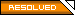
<style>
.page{position:relative;width:75px;height:15px;background:#f98b00}
.page>*{position:absolute;margin:0}
.t1{font:8px "BitDustTwo";color:#ffffff}
</style>
<div class="page">
<p class="t1" style="left:9px;top:5px;width:47px;height:5px">RESOLVED</p>
</div>
